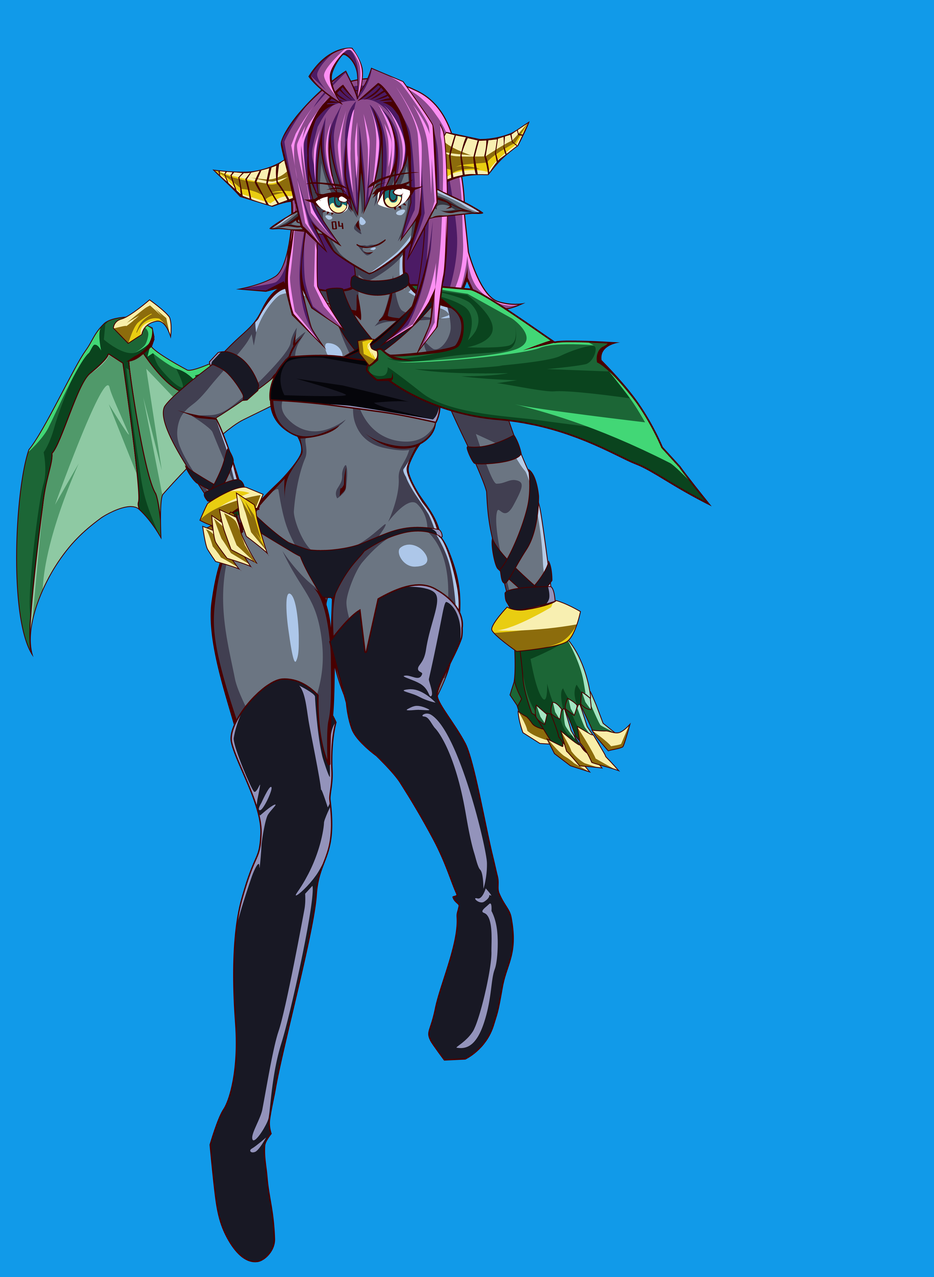
<style>
.page{position:relative;width:934px;height:1277px;background:#119ae9}
.page>*{position:absolute;margin:0}
.t1{font:12.1px "SFElectrotome";color:#480000;scale:0.94 1}
</style>
<div class="page">
<p class="t1" style="left:331px;top:221px;width:13px;height:9px;rotate:-4deg">04</p>
</div>
